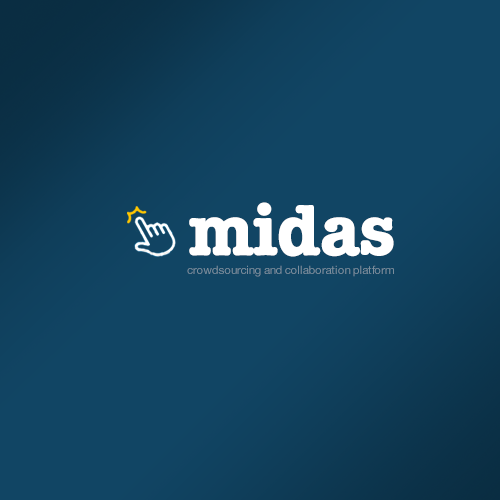
<style>
.page{position:relative;width:500px;height:500px;background:#114564}
.page>*{position:absolute;margin:0}
.t1{font:72px "KeyboardCondensedSSiBoldCondensed";letter-spacing:-0.02em;color:#ffffff;scale:1.25 1}
.t2{font:11.5px "HelveticaNeue";letter-spacing:-0.025em;color:#7a8d9d}
</style>
<div class="page">
<p class="t1" style="left:189px;top:202px;width:205px;height:55px">midas</p>
<p class="t2" style="left:187px;top:265px;width:207px;height:12px">crowdsourcing and collaboration platform</p>
</div>
